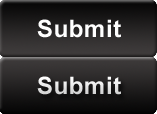
<style>
.page{position:relative;width:157px;height:114px}
.page>*{position:absolute;margin:0}
.t1{font:24px "Arial-BoldMT";letter-spacing:0.025em;color:#ffffff}
.t2{font:24px "Arial-BoldMT";letter-spacing:0.025em;color:#e6e6e6}
</style>
<div class="page">
<p class="t1" style="left:37px;top:19px;width:84px;height:19px">Submit</p>
<p class="t2" style="left:37px;top:76px;width:84px;height:19px">Submit</p>
</div>
